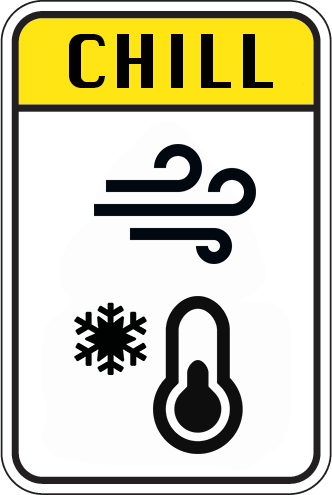
<style>
.page{position:relative;width:332px;height:495px;background:#ffffff}
.page>*{position:absolute;margin:0}
.t1{font:72px "Krungthep";color:#000000}
</style>
<div class="page">
<p class="t1" style="left:69px;top:34px;width:204px;height:54px">CHILL</p>
</div>
